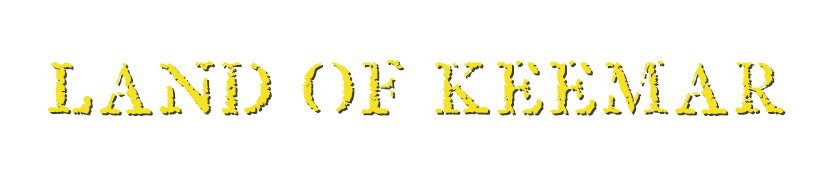
<style>
.page{position:relative;width:822px;height:175px;background:#ffffff}
.page>*{position:absolute;margin:0}
.t1{font:60px "OldRubberStamp";letter-spacing:0.08em;color:#f5e31f}
.t2{font:60px "OldRubberStamp";letter-spacing:0.08em}
</style>
<div class="page">
<p class="t1" style="left:47px;top:59px;width:737px;height:55px">LAND OF KEEMAR</p>
<p class="t2" style="left:49px;top:61px;width:737px;height:55px">LAND OF KEEMAR</p>
</div>
